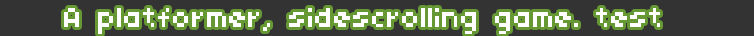
<style>
.page{position:relative;width:754px;height:36px;background:#333333}
.page>*{position:absolute;margin:0}
.t1{font:30px "04b03";color:#ffffff}
</style>
<div class="page">
<p class="t1" style="left:64px;top:8px;width:596px;height:26px">A platformer, sidescrolling game. test</p>
</div>
